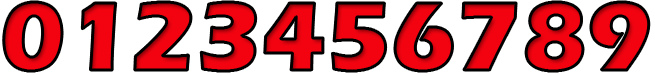
<style>
.page{position:relative;width:655px;height:76px;background:#ffffff}
.page>*{position:absolute;margin:0}
.t1{font:100px "ErasITC-Bold";color:#e60721}
</style>
<div class="page">
<p class="t1" style="left:3px;top:2px;width:646px;height:69px">0123456789</p>
</div>
